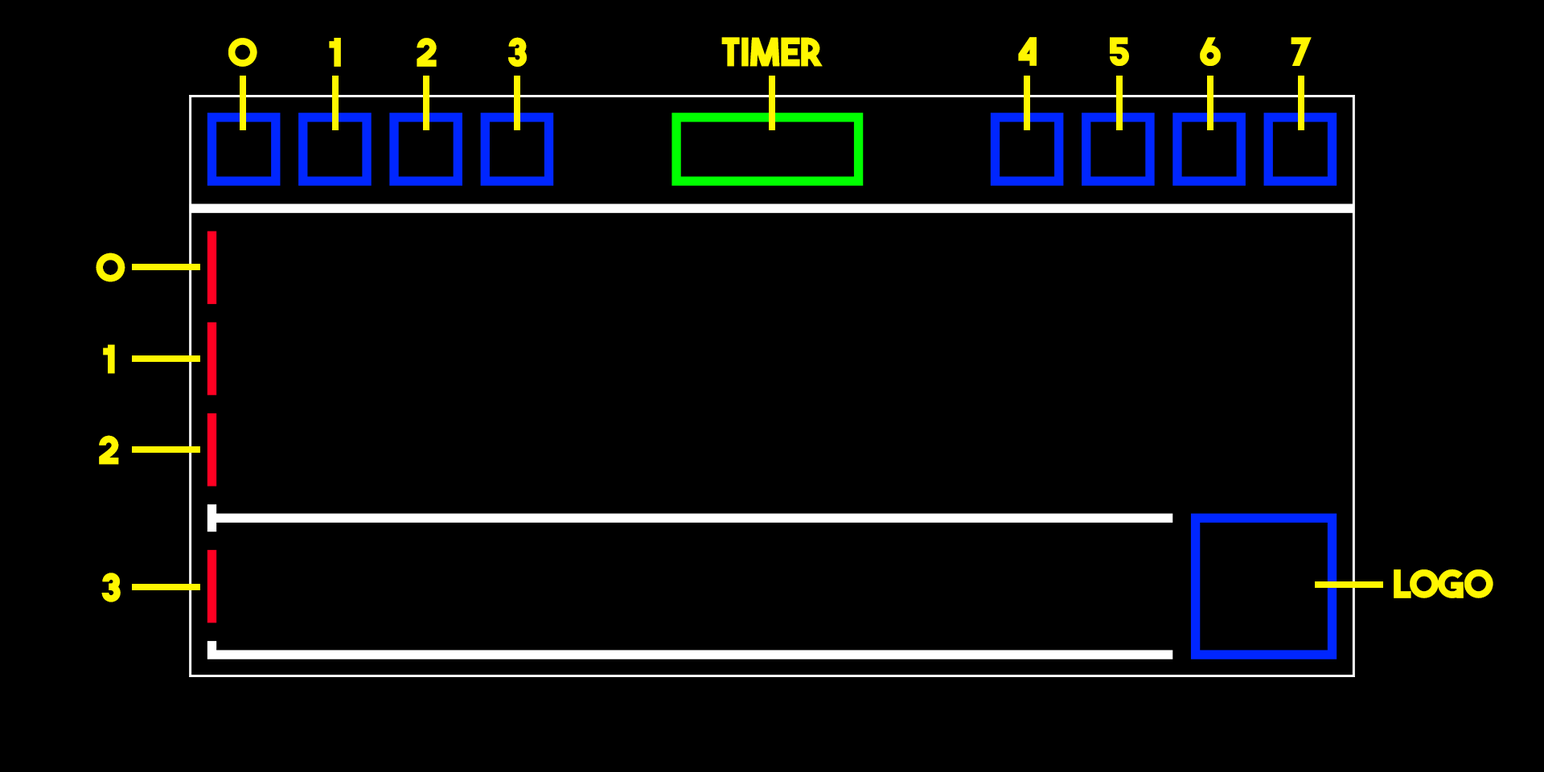
<style>
.page{position:relative;width:1544px;height:772px;background:#000000}
.page>*{position:absolute;margin:0}
.t1{font:38.6px "TheBoldFont-Bold";color:#fff600;text-transform:uppercase}
</style>
<div class="page">
<p class="t1" style="left:228px;top:38px;width:29px;height:29px">0</p>
<p class="t1" style="left:329px;top:38px;width:12px;height:29px">1</p>
<p class="t1" style="left:417px;top:38px;width:20px;height:29px">2</p>
<p class="t1" style="left:508px;top:37px;width:19px;height:30px">3</p>
<p class="t1" style="left:721px;top:37px;width:102px;height:30px">Timer</p>
<p class="t1" style="left:1018px;top:37px;width:19px;height:29px">4</p>
<p class="t1" style="left:1110px;top:37px;width:19px;height:29px">5</p>
<p class="t1" style="left:1200px;top:37px;width:21px;height:29px">6</p>
<p class="t1" style="left:1291px;top:37px;width:21px;height:29px">7</p>
<p class="t1" style="left:96px;top:253px;width:29px;height:29px">0</p>
<p class="t1" style="left:103px;top:344px;width:12px;height:30px">1</p>
<p class="t1" style="left:99px;top:435px;width:20px;height:30px">2</p>
<p class="t1" style="left:1394px;top:569px;width:100px;height:29px">Logo</p>
<p class="t1" style="left:101px;top:573px;width:20px;height:29px">3</p>
</div>
